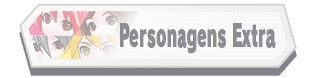
<style>
.page{position:relative;width:316px;height:78px;background:#ffffff}
.page>*{position:absolute;margin:0}
.t1{font:30.7px "RodinPro-UB";color:#8c8c92;scale:0.5 1}
</style>
<div class="page">
<p class="t1" style="left:120px;top:23px;width:156px;height:31px">Personagens Extra</p>
</div>
